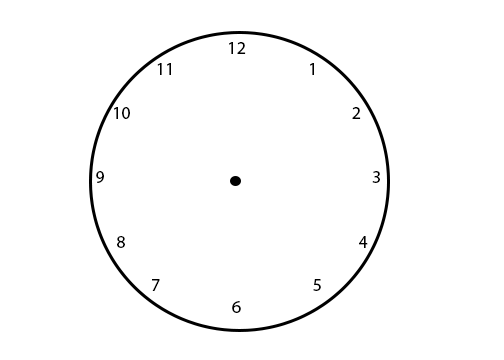
<style>
.page{position:relative;width:504px;height:360px;background:#ffffff}
.page>*{position:absolute;margin:0}
.t1{font:18px "MyriadPro-Regular";color:#000000}
</style>
<div class="page">
<p class="t1" style="left:96px;top:42px;width:284px;height:271px;text-align:center">12<br>11                                   1<br> <br>10                                                          2<br><br><br> 9                                                                      3<br><br>                                                              <br>   8                                                             4<br>                                              <br>7                                        5<br>6</p>
</div>
